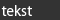
<style>
.page{position:relative;width:60px;height:20px;background:#333333}
.page>*{position:absolute;margin:0}
.t1{font:14px "KozGoPr6N-Regular";color:#ffffff}
</style>
<div class="page">
<p class="t1" style="left:1px;top:5px;width:31px;height:11px">tekst</p>
</div>
